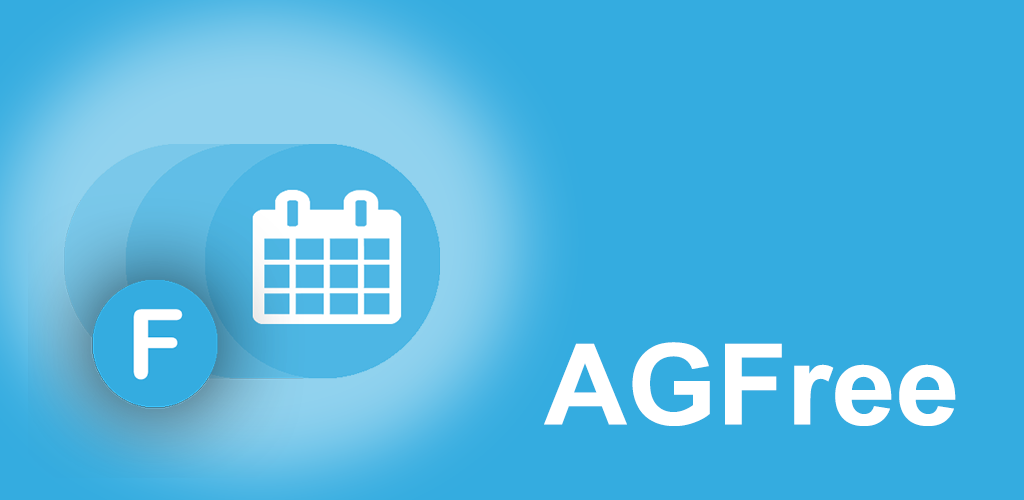
<style>
.page{position:relative;width:1024px;height:500px;background:#34ace0}
.page>*{position:absolute;margin:0}
.t1{font:112.3px "Arial-BoldMT";color:#ffffff}
</style>
<div class="page">
<p class="t1" style="left:544px;top:342px;width:412px;height:84px">AGFree</p>
</div>
